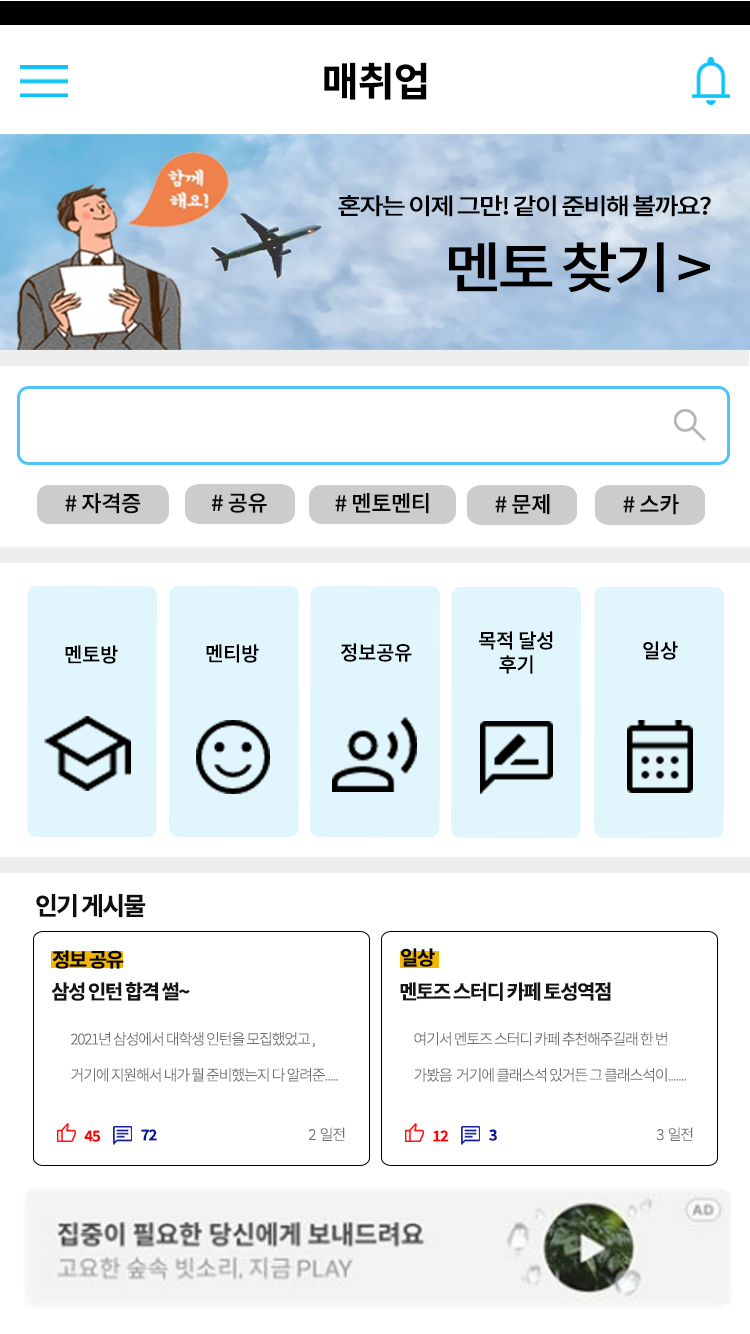
<style>
.page{position:relative;width:750px;height:1334px;background:#ffffff}
.page>*{position:absolute;margin:0}
.t1{font:40px "NotoSansKR-Bold";letter-spacing:-0.02em;color:#000000}
.t2{font:23px "NotoSansKR-Medium";letter-spacing:-0.075em;color:#010101;scale:1.15 1}
.t3{font:55px "NotoSansKR-Medium";letter-spacing:-0.075em;color:#000000;scale:1.15 1}
.t4{font:22px "NotoSansKR-Medium";letter-spacing:-0.02em;color:#090909}
.t5{font:20px "NotoSansKR-Medium";letter-spacing:-0.02em;color:#000000}
.t6{font:25px "NotoSansKR-Bold";letter-spacing:-0.075em;color:#0f0e0e}
.t7{font:20px "NotoSansKR-Bold";letter-spacing:-0.075em;color:#050505}
.t8{font:20px "NotoSansKR-Bold";letter-spacing:-0.075em;color:#131516}
.t9{font:15px "NotoSansKR-Light";letter-spacing:-0.075em;color:#6e6f73}
.t10{font:15px "NotoSansKR-Bold";letter-spacing:-0.075em;color:#ff0000}
.t11{font:15px "NotoSansKR-Bold";letter-spacing:-0.075em;color:#0a1496}
</style>
<div class="page">
<p class="t1" style="left:324px;top:62px;width:103px;height:38px">매취업</p>
<p class="t2" style="left:338px;top:195px;width:373px;height:22px">혼자는 이제 그만! 같이 준비해 볼까요?</p>
<p class="t3" style="left:449px;top:242px;width:261px;height:51px">멘토 찾기 &gt;</p>
<p class="t4" style="left:65px;top:493px;width:76px;height:21px"># 자격증</p>
<p class="t4" style="left:211px;top:493px;width:56px;height:20px"># 공유</p>
<p class="t4" style="left:335px;top:493px;width:94px;height:21px"># 멘토멘티</p>
<p class="t4" style="left:495px;top:494px;width:55px;height:21px"># 문제</p>
<p class="t4" style="left:623px;top:494px;width:56px;height:21px"># 스카</p>
<p class="t5" style="left:479px;top:631px;width:74px;height:43px">목적 달성<br>     후기</p>
<p class="t5" style="left:643px;top:641px;width:35px;height:19px">일상</p>
<p class="t5" style="left:65px;top:645px;width:53px;height:19px">멘토방</p>
<p class="t5" style="left:206px;top:644px;width:53px;height:19px">멘티방</p>
<p class="t5" style="left:341px;top:643px;width:71px;height:19px">정보공유</p>
<p class="t6" style="left:36px;top:894px;width:110px;height:24px">인기 게시물</p>
<p class="t7" style="left:52px;top:950px;width:72px;height:19px">정보 공유</p>
<p class="t7" style="left:401px;top:948px;width:34px;height:19px">일상</p>
<p class="t8" style="left:51px;top:982px;width:139px;height:19px">삼성 인턴 합격 썰~</p>
<p class="t8" style="left:400px;top:982px;width:211px;height:19px">멘토즈 스터디 카페 토성역점</p>
<p class="t9" style="left:71px;top:1032px;width:267px;height:50px">2021년 삼성에서 대학생 인턴을 모집했었고 ,<br><br>거기에 지원해서 내가 뭘 준비했는지 다 알려준.....</p>
<p class="t9" style="left:414px;top:1032px;width:272px;height:50px">여기서 멘토즈 스터디 카페 추천해주길래 한 번<br><br>가봤음  거기에 클래스석 있거든 그 클래스석이.......</p>
<p class="t10" style="left:84px;top:1130px;width:16px;height:12px">45</p>
<p class="t11" style="left:141px;top:1129px;width:16px;height:12px">72</p>
<p class="t9" style="left:308px;top:1127px;width:37px;height:14px">2  일전</p>
<p class="t10" style="left:433px;top:1130px;width:16px;height:12px">12</p>
<p class="t11" style="left:489px;top:1129px;width:8px;height:12px">3</p>
<p class="t9" style="left:656px;top:1127px;width:37px;height:14px">3  일전</p>
</div>
